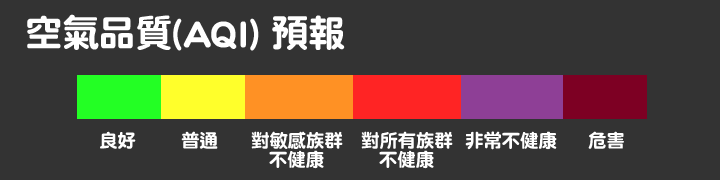
<style>
.page{position:relative;width:720px;height:180px;background:#333333}
.page>*{position:absolute;margin:0}
.t1{font:37.5px "DFNYuan-W9-WINP-BF";letter-spacing:-0.025em;color:#ffffff}
.t2{font:18.8px "DFNYuan-W9-WIN-BF";letter-spacing:-0.025em;color:#ffffff}
.t3{font:18.8px/12.5px "DFNYuan-W9-WIN-BF";letter-spacing:-0.025em;color:#ffffff}
</style>
<div class="page">
<p class="t1" style="left:27px;top:14px;width:318px;height:37px">空氣品質(AQI) 預報</p>
<p class="t2" style="left:100px;top:131px;width:36px;height:18px">良好</p>
<p class="t2" style="left:181px;top:131px;width:37px;height:18px">普通</p>
<p class="t3" style="left:251px;top:131px;width:92px;height:38px;text-align:justify">對敏感族群<br>  不健康</p>
<p class="t3" style="left:361px;top:131px;width:92px;height:38px;text-align:justify">對所有族群<br>  不健康</p>
<p class="t2" style="left:465px;top:131px;width:92px;height:19px">非常不健康</p>
<p class="t2" style="left:588px;top:131px;width:36px;height:18px">危害</p>
</div>
